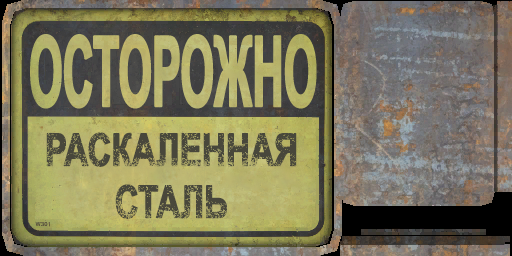
<style>
.page{position:relative;width:512px;height:256px}
.page>*{position:absolute;margin:0}
.t1{font:44.9px/52px "Arial-BoldMT";letter-spacing:-0.02em;color:#48473b;font-weight:bold;scale:0.74 1}
</style>
<div class="page">
<p class="t1" style="left:46px;top:132px;width:251px;height:87px;text-align:center">РАСКАЛЕННАЯ<br>СТАЛЬ</p>
</div>
